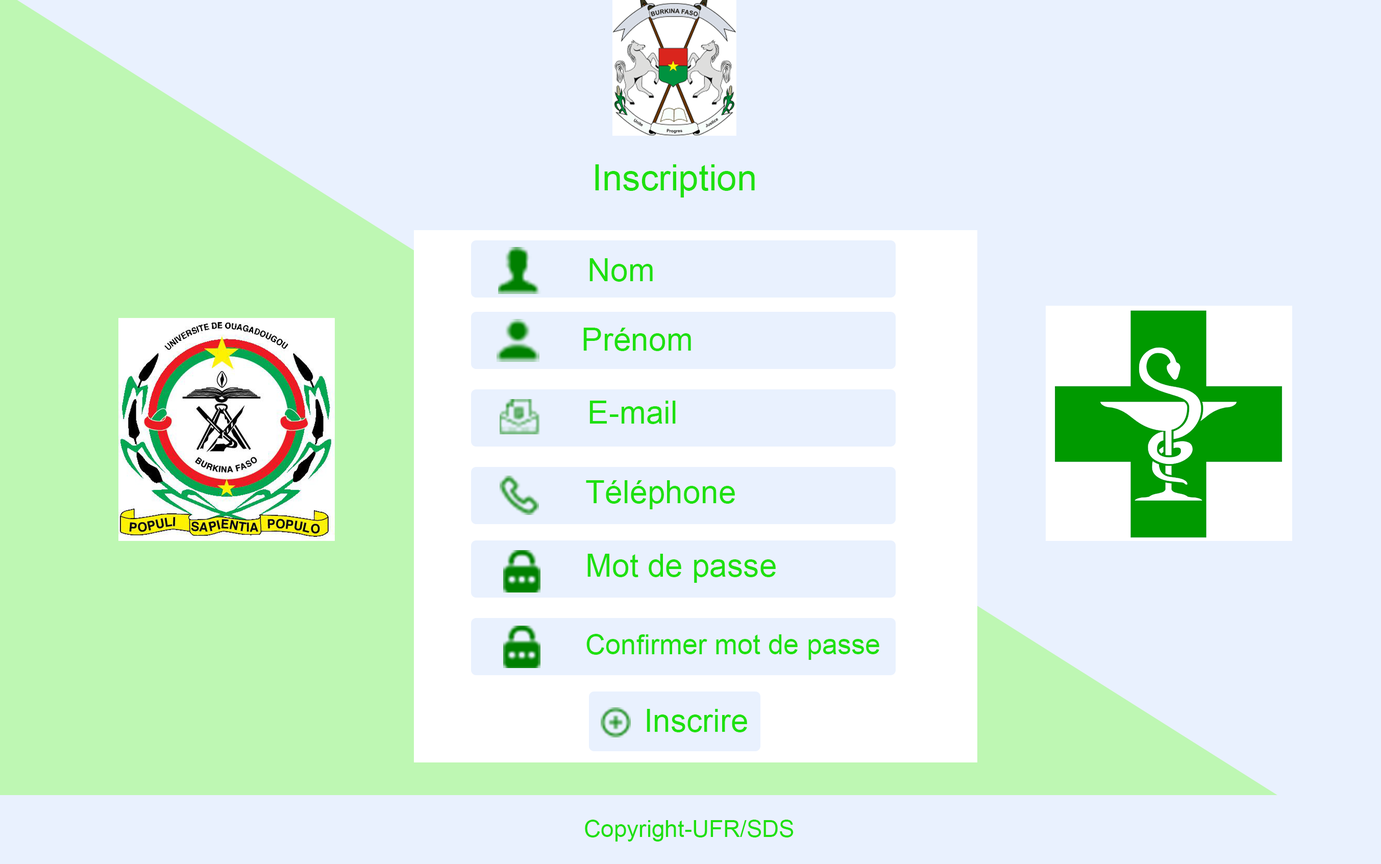
<style>
.page{position:relative;width:1381px;height:864px;background:#e9f1fe}
.page>*{position:absolute;margin:0}
.t1{font:36.1px "ArialMT";color:#1ee00f}
.t2{font:31.9px "ArialMT";color:#1ee00f}
.t3{font:27.6px "ArialMT";color:#1ee00f}
.t4{font:23.4px "ArialMT";color:#1ee00f}
</style>
<div class="page">
<p class="t1" style="left:595px;top:164px;width:160px;height:33px">Inscription</p>
<p class="t2" style="left:589px;top:258px;width:64px;height:24px">Nom</p>
<p class="t2" style="left:583px;top:328px;width:108px;height:23px">Prénom</p>
<p class="t2" style="left:589px;top:400px;width:86px;height:24px">E-mail</p>
<p class="t2" style="left:586px;top:480px;width:149px;height:29px">Téléphone</p>
<p class="t2" style="left:587px;top:554px;width:188px;height:29px">Mot de passe</p>
<p class="t3" style="left:586px;top:634px;width:293px;height:26px">Confirmer mot de passe</p>
<p class="t2" style="left:646px;top:709px;width:101px;height:23px">Inscrire</p>
<p class="t4" style="left:585px;top:819px;width:208px;height:22px">Copyright-UFR/SDS</p>
</div>
